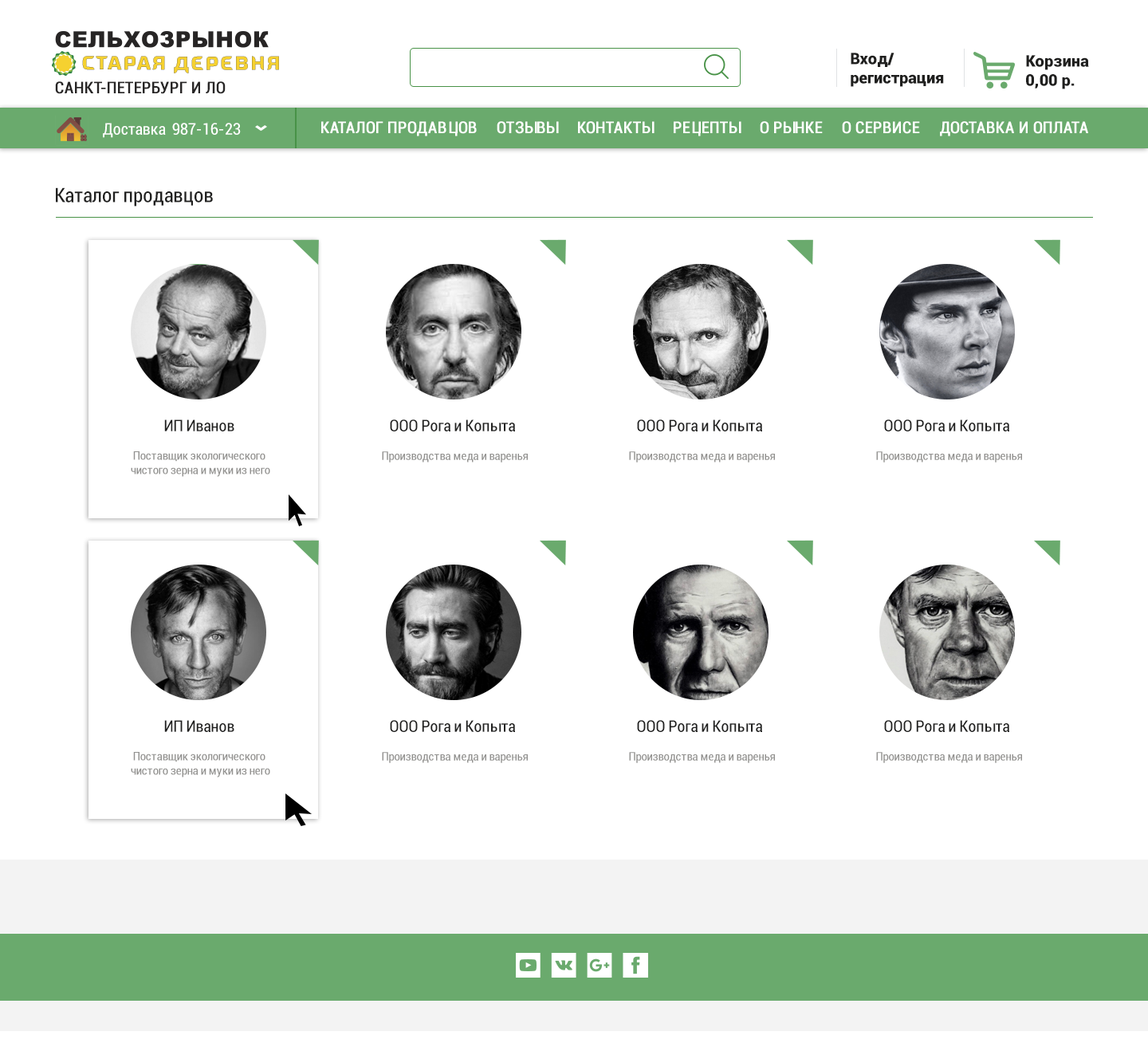
<style>
.page{position:relative;width:1148px;height:1039px;background:#ffffff}
.page>*{position:absolute;margin:0}
.t1{font:15.9px "Roboto-Black";color:#20201f}
.t2{font:15.9px "Roboto-Condensed";color:#272525;text-transform:uppercase;font-weight:bold}
.t3{font:15.9px "Roboto-Condensed";color:#ffffff}
.t4{font:15.9px "Roboto-Condensed";color:#ffffff;text-transform:uppercase;font-weight:bold}
.t5{font:19.9px "Roboto-Condensed";color:#20201f}
.t6{font:15.9px "Roboto-Condensed";color:#20201f}
.t7{font:12px "Roboto-Condensed";color:#939290}
</style>
<div class="page">
<p class="t1" style="left:851px;top:53px;width:93px;height:34px">Вход/<br>регистрация</p>
<p class="t1" style="left:1026px;top:55px;width:63px;height:34px">Корзина<br>0,00 р.</p>
<p class="t2" style="left:55px;top:81px;width:171px;height:13px">Санкт-Петербург и ЛО</p>
<p class="t3" style="left:103px;top:123px;width:63px;height:15px">Доставка</p>
<p class="t3" style="left:172px;top:123px;width:69px;height:12px">987-16-23</p>
<p class="t4" style="left:321px;top:121px;width:156px;height:15px">Каталог продавцов</p>
<p class="t4" style="left:497px;top:121px;width:62px;height:13px">Отзывы</p>
<p class="t4" style="left:578px;top:121px;width:76px;height:13px">Контакты</p>
<p class="t4" style="left:674px;top:121px;width:67px;height:15px">Рецепты</p>
<p class="t4" style="left:760px;top:121px;width:63px;height:13px">О рынке</p>
<p class="t4" style="left:842px;top:121px;width:78px;height:13px">О Сервисе</p>
<p class="t4" style="left:940px;top:121px;width:148px;height:15px">Доставка и оплата</p>
<p class="t5" style="left:56px;top:187px;width:157px;height:19px">Каталог продавцов</p>
<p class="t6" style="left:164px;top:419px;width:70px;height:12px">ИП Иванов</p>
<p class="t6" style="left:390px;top:419px;width:125px;height:12px">ООО Рога и Копыта</p>
<p class="t6" style="left:637px;top:419px;width:125px;height:12px">ООО Рога и Копыта</p>
<p class="t6" style="left:884px;top:419px;width:125px;height:12px">ООО Рога и Копыта</p>
<p class="t7" style="left:131px;top:451px;width:139px;height:26px;text-align:center">Поставщик экологического <br>чистого зерна и муки из него</p>
<p class="t7" style="left:382px;top:451px;width:146px;height:11px">Производства меда и варенья</p>
<p class="t7" style="left:629px;top:451px;width:146px;height:11px">Производства меда и варенья</p>
<p class="t7" style="left:876px;top:451px;width:146px;height:11px">Производства меда и варенья</p>
<p class="t6" style="left:164px;top:720px;width:70px;height:12px">ИП Иванов</p>
<p class="t6" style="left:390px;top:720px;width:125px;height:12px">ООО Рога и Копыта</p>
<p class="t6" style="left:637px;top:720px;width:125px;height:12px">ООО Рога и Копыта</p>
<p class="t6" style="left:884px;top:720px;width:125px;height:12px">ООО Рога и Копыта</p>
<p class="t7" style="left:131px;top:752px;width:139px;height:25px;text-align:center">Поставщик экологического <br>чистого зерна и муки из него</p>
<p class="t7" style="left:382px;top:752px;width:146px;height:11px">Производства меда и варенья</p>
<p class="t7" style="left:629px;top:752px;width:146px;height:11px">Производства меда и варенья</p>
<p class="t7" style="left:876px;top:752px;width:146px;height:11px">Производства меда и варенья</p>
</div>
